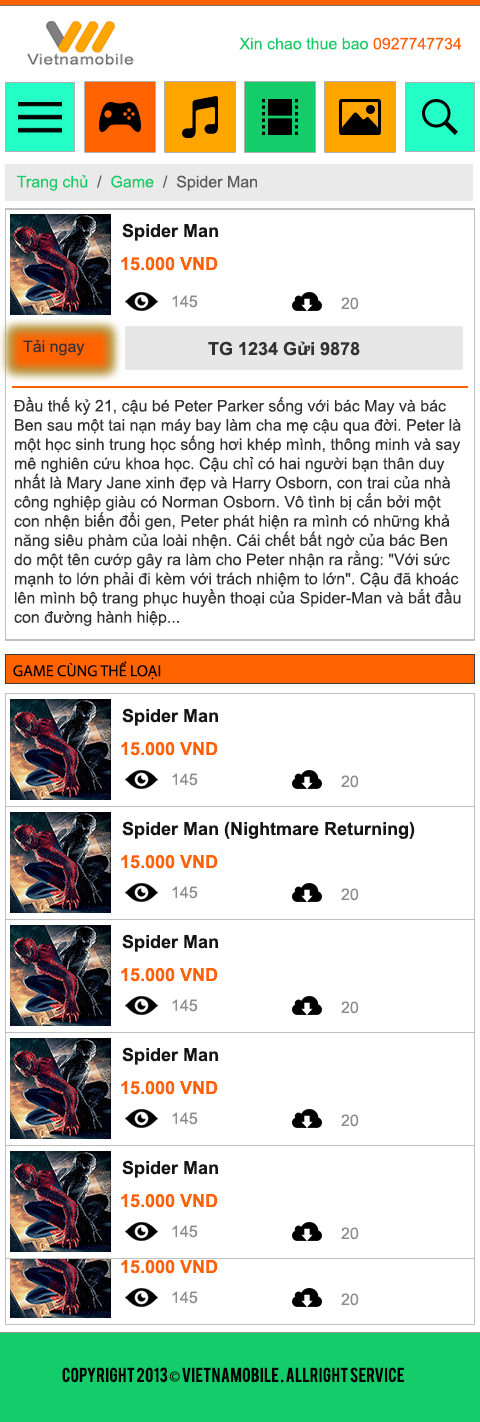
<style>
.page{position:relative;width:480px;height:1422px;background:#ffffff}
.page>*{position:absolute;margin:0}
.t1{font:16px "ArialMT";color:#14cc69}
.t2{font:16px "ArialMT";color:#ff6200}
.t3{font:16px "ArialMT";color:#5b5b5b}
.t4{font:18px "Arial-BoldMT";color:#151515}
.t5{font:18px "Arial-BoldMT";color:#ff6200}
.t6{font:16px "ArialMT";color:#8d8d8d}
.t7{font:16px "ArialMT";color:#323232}
.t8{font:18px "Arial-BoldMT";color:#323232}
.t9{font:16px "MyriadPro-Regular";color:#000000}
.t10{font:16px "Bebas";color:#000000}
</style>
<div class="page">
<p class="t1" style="left:239px;top:37px;width:223px;height:13px">Xin chao thue bao <span class="t2">0927747734</span></p>
<p class="t3" style="left:17px;top:175px;width:240px;height:16px"><span class="t1">Trang chủ</span>  /  <span class="t1">Game </span> /  Spider Man</p>
<p class="t4" style="left:122px;top:223px;width:96px;height:18px">Spider Man</p>
<p class="t5" style="left:121px;top:257px;width:97px;height:14px">15.000 VND</p>
<p class="t6" style="left:172px;top:295px;width:26px;height:13px">145</p>
<p class="t6" style="left:341px;top:297px;width:18px;height:13px">20</p>
<p class="t7" style="left:23px;top:339px;width:62px;height:17px">Tải ngay</p>
<p class="t8" style="left:208px;top:341px;width:152px;height:15px">TG 1234 Gửi 9878</p>
<p class="t7" style="left:13px;top:397px;width:448px;height:230px">Đầu thế kỷ 21, cậu bé Peter Parker sống với bác May và bác Ben sau một tai nạn máy bay làm cha mẹ cậu qua đời. Peter là một học sinh trung học sống hơi khép mình, thông minh và say mê nghiên cứu khoa học. Cậu chỉ có hai người bạn thân duy nhất là Mary Jane xinh đẹp và Harry Osborn, con trai của nhà công nghiệp giàu có Norman Osborn. Vô tình bị cắn bởi một con nhện biến đổi gen, Peter phát hiện ra mình có những khả năng siêu phàm của loài nhện. Cái chết bất ngờ của bác Ben do một tên cướp gây ra làm cho Peter nhận ra rằng: "Với sức mạnh to lớn phải đi kèm với trách nhiệm to lớn". Cậu đã khoác lên mình bộ trang phục huyền thoại của Spider-Man và bắt đầu con đường hành hiệp...</p>
<p class="t9" style="left:13px;top:661px;width:148px;height:19px">GAME CÙNG THỂ LOẠI</p>
<p class="t4" style="left:122px;top:708px;width:96px;height:18px">Spider Man</p>
<p class="t5" style="left:121px;top:742px;width:97px;height:14px">15.000 VND</p>
<p class="t6" style="left:172px;top:773px;width:26px;height:13px">145</p>
<p class="t6" style="left:341px;top:775px;width:18px;height:13px">20</p>
<p class="t4" style="left:122px;top:821px;width:293px;height:18px">Spider Man (Nightmare Returning)</p>
<p class="t5" style="left:121px;top:855px;width:97px;height:14px">15.000 VND</p>
<p class="t6" style="left:172px;top:886px;width:26px;height:13px">145</p>
<p class="t6" style="left:341px;top:888px;width:18px;height:13px">20</p>
<p class="t4" style="left:122px;top:934px;width:96px;height:18px">Spider Man</p>
<p class="t5" style="left:121px;top:968px;width:97px;height:14px">15.000 VND</p>
<p class="t6" style="left:172px;top:999px;width:26px;height:13px">145</p>
<p class="t6" style="left:341px;top:1001px;width:18px;height:13px">20</p>
<p class="t4" style="left:122px;top:1047px;width:96px;height:18px">Spider Man</p>
<p class="t5" style="left:121px;top:1081px;width:97px;height:14px">15.000 VND</p>
<p class="t6" style="left:172px;top:1112px;width:26px;height:13px">145</p>
<p class="t6" style="left:341px;top:1114px;width:18px;height:13px">20</p>
<p class="t4" style="left:122px;top:1160px;width:96px;height:18px">Spider Man</p>
<p class="t5" style="left:121px;top:1194px;width:97px;height:14px">15.000 VND</p>
<p class="t6" style="left:172px;top:1225px;width:26px;height:13px">145</p>
<p class="t6" style="left:341px;top:1227px;width:18px;height:13px">20</p>
<p class="t5" style="left:121px;top:1260px;width:97px;height:14px">15.000 VND</p>
<p class="t6" style="left:172px;top:1291px;width:26px;height:13px">145</p>
<p class="t6" style="left:341px;top:1293px;width:18px;height:13px">20</p>
<p class="t10" style="left:62px;top:1367px;width:342px;height:16px">Copyright 2013 <span class="t9">©</span> Vietnamobile . Allright service</p>
</div>
